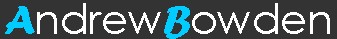
<style>
.page{position:relative;width:337px;height:39px;background:#333333}
.page>*{position:absolute;margin:0}
.t1{font:41.7px "CenturyGothic";color:#ffffff}
.t2{font:41.7px "ForteMT";color:#00ccff}
</style>
<div class="page">
<p class="t1" style="left:5px;top:3px;width:325px;height:36px"><span class="t2">A</span>ndrew<span class="t2">B</span>owden</p>
</div>
